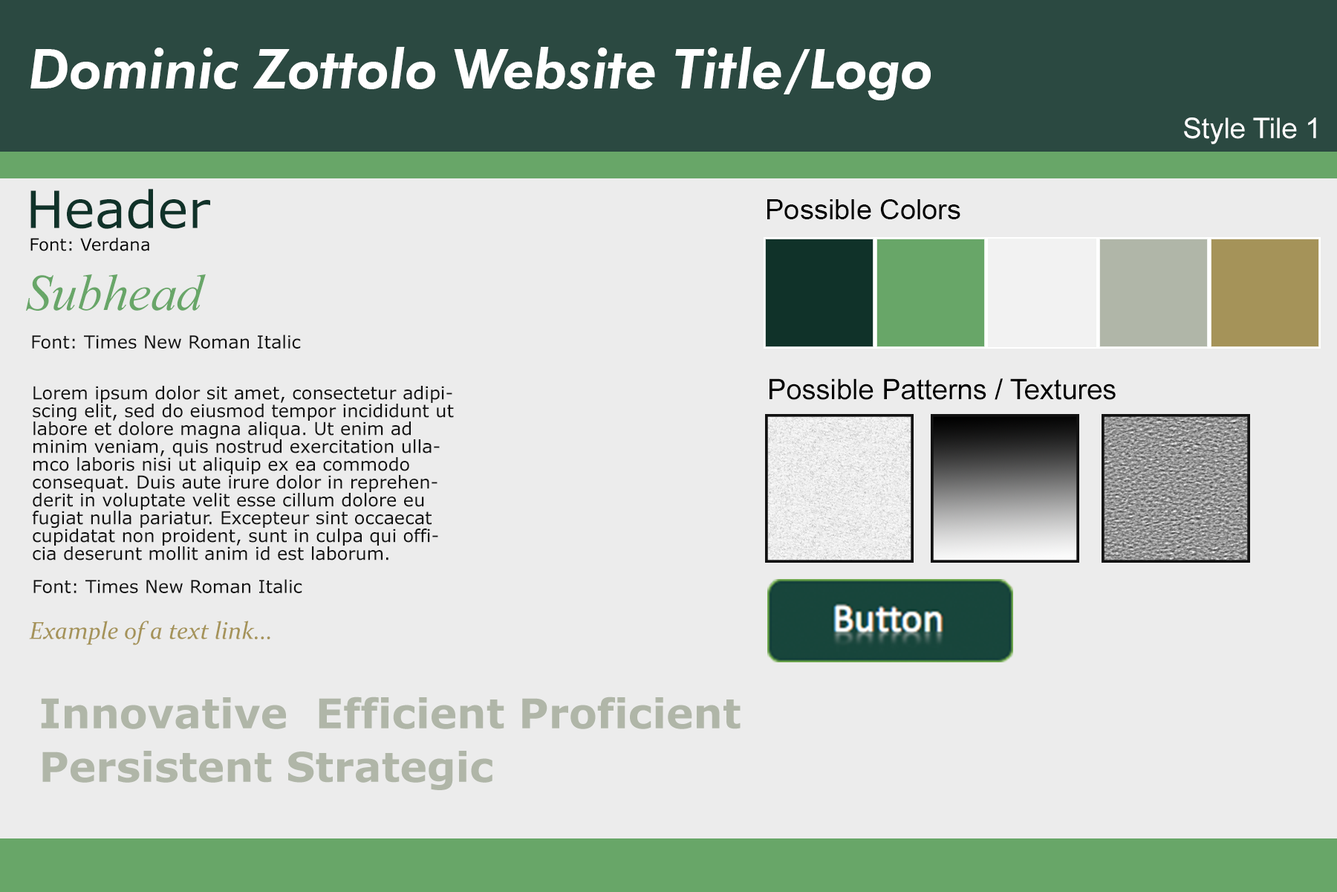
<style>
.page{position:relative;width:1337px;height:892px;background:#ececec}
.page>*{position:absolute;margin:0}
.t1{font:55px "FuturaBT-HeavyItalic";color:#ffffff}
.t2{font:28.2px "ArialMT";color:#ffffff}
.t3{font:51.3px "Verdana";color:#103229}
.t4{font:28.2px "ArialMT";color:#000000}
.t5{font:17.1px "Verdana";color:#000000}
.t6{font:51.3px "TimesNewRomanPS-ItalicMT";color:#68a668}
.t7{font:17.8px "Verdana";color:#111111}
.t8{font:17.8px/17.8px "Verdana";color:#111111}
.t9{font:24.5px "Constantia-Italic";color:#a59359}
.t10{font:40.9px/17.8px "Verdana-Bold";color:#b0b6a8}
</style>
<div class="page">
<p class="t1" style="left:30px;top:47px;width:901px;height:53px">Dominic Zottolo Website Title/Logo</p>
<p class="t2" style="left:1184px;top:117px;width:133px;height:27px">Style Tile 1</p>
<p class="t3" style="left:30px;top:189px;width:180px;height:40px">Header</p>
<p class="t4" style="left:768px;top:199px;width:193px;height:20px">Possible Colors</p>
<p class="t5" style="left:30px;top:237px;width:119px;height:14px">Font: Verdana</p>
<p class="t6" style="left:26px;top:274px;width:180px;height:37px">Subhead</p>
<p class="t7" style="left:32px;top:334px;width:269px;height:14px">Font: Times New Roman Italic</p>
<p class="t8" style="left:32px;top:386px;width:422px;height:174px">Lorem ipsum dolor sit amet, consectetur adipiscing elit, sed do eiusmod tempor incididunt ut labore et dolore magna aliqua. Ut enim ad minim veniam, quis nostrud exercitation ullamco laboris nisi ut aliquip ex ea commodo consequat. Duis aute irure dolor in reprehenderit in voluptate velit esse cillum dolore eu fugiat nulla pariatur. Excepteur sint occaecat cupidatat non proident, sunt in culpa qui officia deserunt mollit anim id est laborum.</p>
<p class="t4" style="left:770px;top:378px;width:346px;height:22px">Possible Patterns /] Textures</p>
<p class="t7" style="left:33px;top:579px;width:269px;height:14px">Font: Times New Roman Italic</p>
<p class="t9" style="left:29px;top:620px;width:241px;height:25px">Example of a text link...</p>
<p class="t10" style="left:41px;top:696px;width:700px;height:94px">Innovative  Efficient Proficient <br><br><br>Persistent Strategic</p>
</div>
